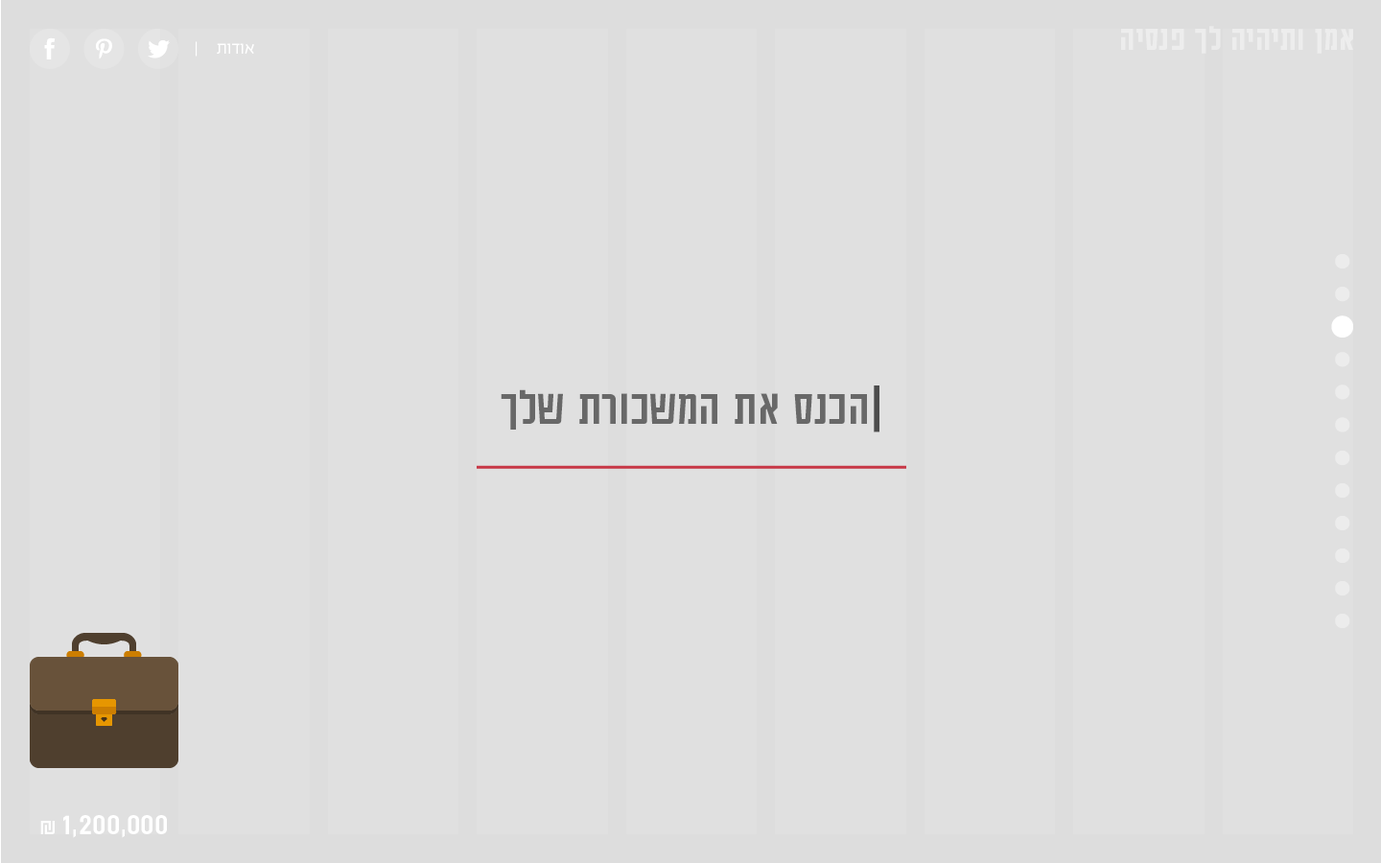
<style>
.page{position:relative;width:1381px;height:863px;background:#e0e0e0}
.page>*{position:absolute;margin:0}
.t1{font:37.8px "AdumaFOT-Medium";color:#ffffff}
.t2{font:19.2px "EzerBlock_OE-Light";color:#ffffff}
.t3{font:54.5px "AdumaFOT-Regular";color:#686868}
.t4{font:54.5px "AdumaFOT-Regular";color:#4d4d4d}
.t5{font:33.6px "AdumaFOT-Regular";color:#ffffff}
.t6{font:24px "AdumaFOT-Regular";color:#ffffff}
</style>
<div class="page">
<p class="t1" style="left:1121px;top:26px;width:232px;height:28px;opacity:0.4">אמן ותיהיה לך פנסיה</p>
<p class="t2" style="left:196px;top:41px;width:58px;height:16px">אודות     |</p>
<p class="t3" style="left:501px;top:386px;width:379px;height:47px"><span class="t4">|</span>הכנס את המשכורת שלך</p>
<p class="t5" style="left:40px;top:815px;width:127px;height:23px">1,200,000<span class="t6"> ₪</span></p>
</div>
